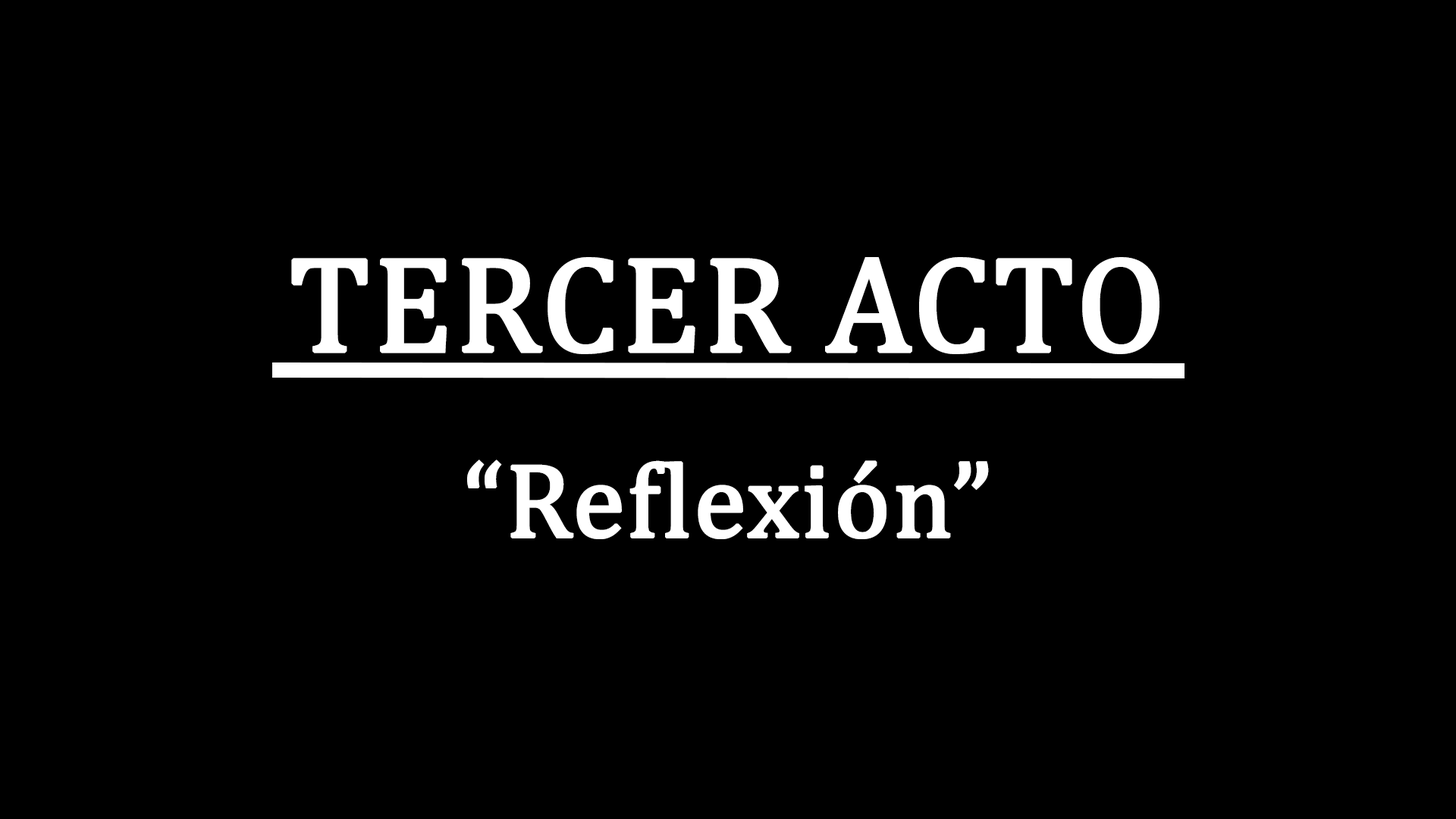
<style>
.page{position:relative;width:1456px;height:819px;background:#000000}
.page>*{position:absolute;margin:0}
.t1{font:136.5px "Cambria";color:#ffffff;font-weight:bold}
.t2{font:106.2px "Cambria";color:#ffffff;font-weight:bold}
</style>
<div class="page">
<p class="t1" style="left:291px;top:257px;width:868px;height:97px">TERCER ACTO</p>
<p class="t2" style="left:467px;top:460px;width:522px;height:79px">“Reflexión”</p>
</div>
